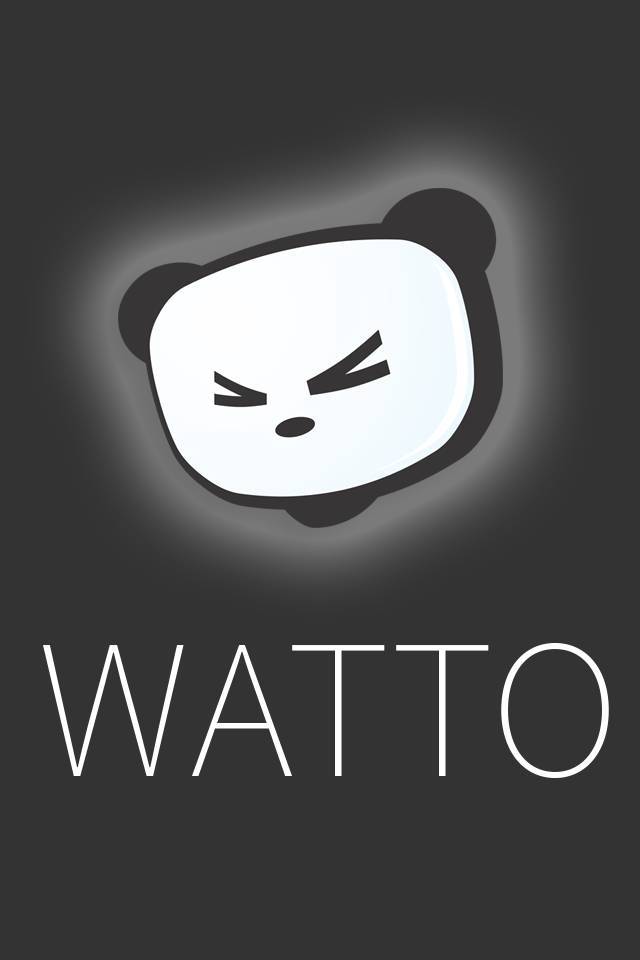
<style>
.page{position:relative;width:640px;height:960px;background:#333333}
.page>*{position:absolute;margin:0}
.t1{font:200px "SourceSansPro-ExtraLight";color:#ffffff}
</style>
<div class="page">
<p class="t1" style="left:43px;top:643px;width:566px;height:135px">WATTO</p>
</div>
